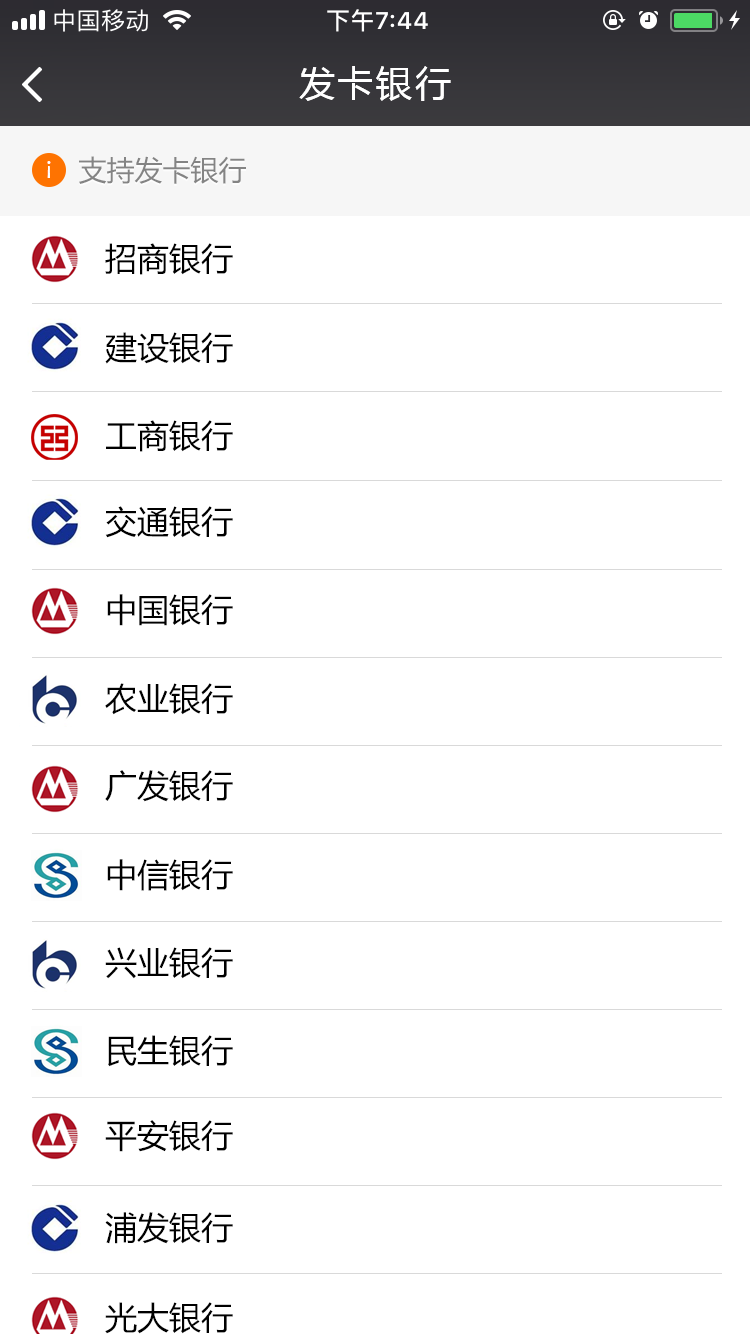
<style>
.page{position:relative;width:750px;height:1334px;background:#ffffff}
.page>*{position:absolute;margin:0}
.t1{font:36px "MicrosoftYaHei";letter-spacing:0.08em;color:#ffffff}
.t2{font:23.1px "MicrosoftYaHei";letter-spacing:0.08em;color:#ffffff}
.t3{font:28px "MicrosoftYaHei";color:#747474}
.t4{font:32px "MicrosoftYaHei";color:#000000}
</style>
<div class="page">
<p class="t1" style="left:299px;top:66px;width:152px;height:35px">发卡银行</p>
<p class="t2" style="left:47px;top:161px;width:4px;height:17px;rotate:180deg">！</p>
<p class="t3" style="left:79px;top:156px;width:167px;height:28px">支持发卡银行</p>
<p class="t4" style="left:105px;top:243px;width:128px;height:32px">招商银行</p>
<p class="t4" style="left:105px;top:332px;width:128px;height:32px">建设银行</p>
<p class="t4" style="left:106px;top:420px;width:127px;height:32px">工商银行</p>
<p class="t4" style="left:105px;top:506px;width:128px;height:32px">交通银行</p>
<p class="t4" style="left:107px;top:594px;width:126px;height:32px">中国银行</p>
<p class="t4" style="left:105px;top:683px;width:128px;height:32px">农业银行</p>
<p class="t4" style="left:105px;top:770px;width:128px;height:32px">广发银行</p>
<p class="t4" style="left:107px;top:859px;width:126px;height:32px">中信银行</p>
<p class="t4" style="left:105px;top:947px;width:128px;height:32px">兴业银行</p>
<p class="t4" style="left:108px;top:1035px;width:125px;height:32px">民生银行</p>
<p class="t4" style="left:105px;top:1120px;width:128px;height:32px">平安银行</p>
<p class="t4" style="left:105px;top:1212px;width:128px;height:32px">浦发银行</p>
<p class="t4" style="left:105px;top:1302px;width:128px;height:32px">光大银行</p>
</div>
